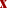
<style>
.page{position:relative;width:7px;height:8px;background:#9a0101}
.page>*{position:absolute;margin:0}
.t1{font:12px "Stencil";color:#9a0101}
</style>
<div class="page">
<p class="t1" style="left:0px;top:0px;width:7px;height:8px">x</p>
</div>
